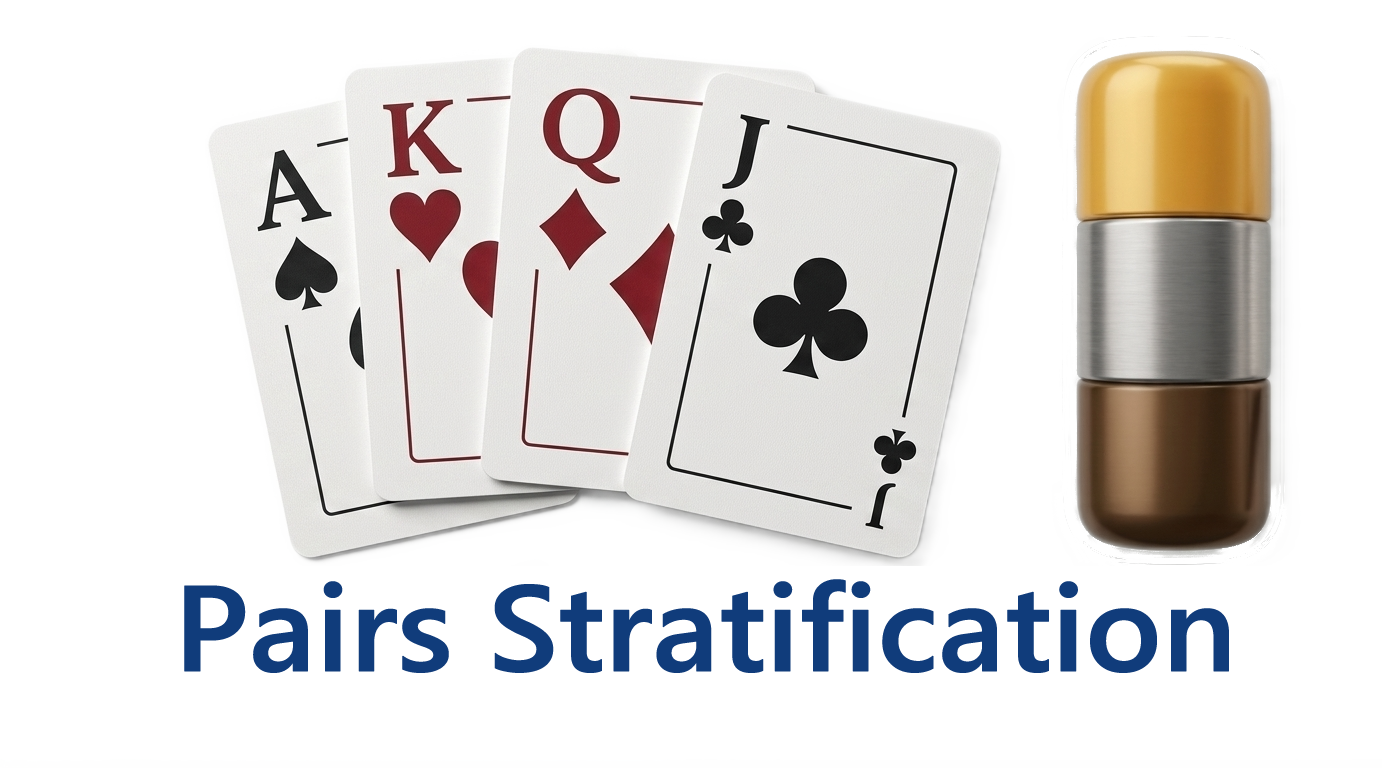
<style>
.page{position:relative;width:1382px;height:768px;background:#ffffff}
.page>*{position:absolute;margin:0}
.t1{font:121.6px "SegoeUI-Semibold";letter-spacing:-0.025em;color:#113c7c;font-weight:bold;scale:1.05 1}
</style>
<div class="page">
<p class="t1" style="left:184px;top:579px;width:1045px;height:94px">Pairs Stratification</p>
</div>
